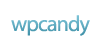
<style>
.page{position:relative;width:100px;height:50px;background:#ffffff}
.page>*{position:absolute;margin:0}
.t1{font:22px "MyriadPro-Regular";letter-spacing:-0.04em;color:#5fabc0}
</style>
<div class="page">
<p class="t1" style="left:11px;top:15px;width:79px;height:21px">wpcandy</p>
</div>
